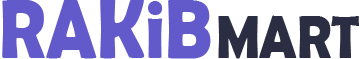
<style>
.page{position:relative;width:360px;height:59px;background:#ffffff}
.page>*{position:absolute;margin:0}
.t1{font:84.4px "BerlinSansFBDemi-Bold";color:#6259ca;scale:0.87 1}
.t2{font:61.6px "BerlinSansFBDemi-Bold";color:#2b2d42;scale:0.87 1}
</style>
<div class="page">
<p class="t1" style="left:2px;top:0px;width:358px;height:59px">RAKiB <span class="t2">MART</span></p>
</div>
